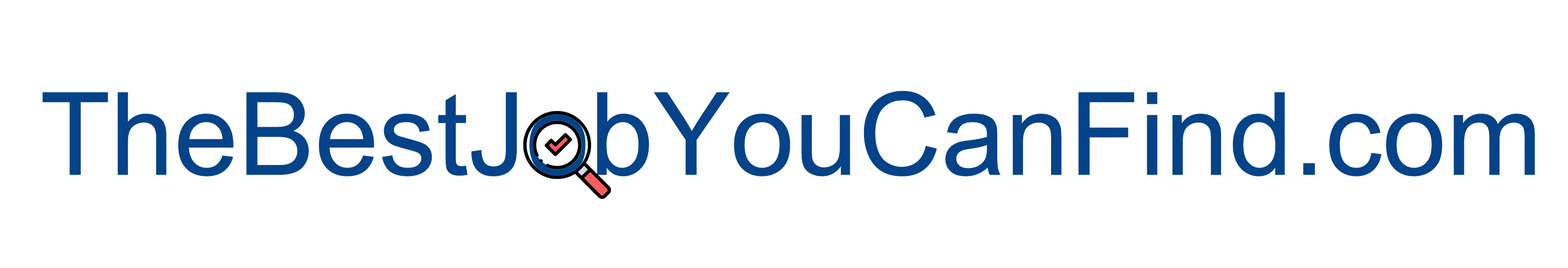
<style>
.page{position:relative;width:1568px;height:268px;background:#ffffff}
.page>*{position:absolute;margin:0}
.t1{font:115px "ArialMT";color:#044389}
</style>
<div class="page">
<p class="t1" style="left:42px;top:90px;width:1493px;height:86px">TheBestJobYouCanFind.com</p>
</div>
